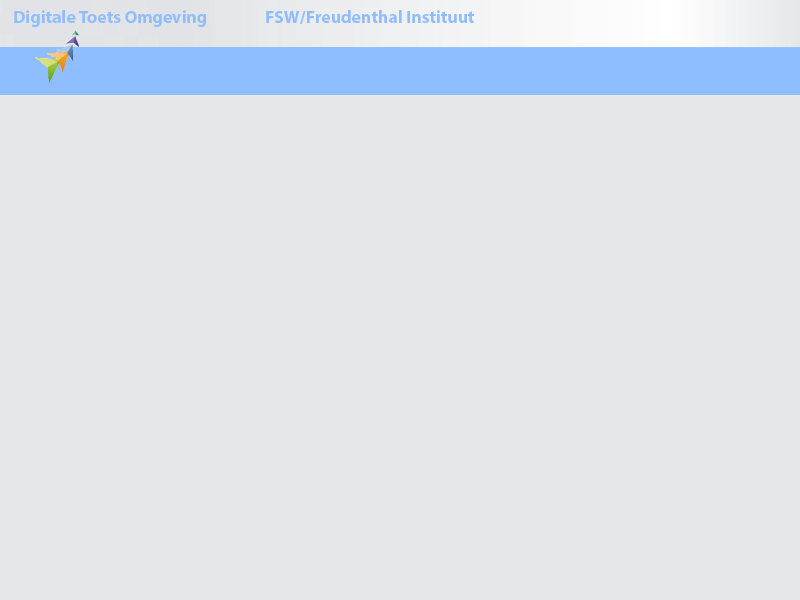
<style>
.page{position:relative;width:800px;height:600px;background:#e6e7e9}
.page>*{position:absolute;margin:0}
.t1{font:17.8px "MyriadPro-Bold";color:#8ebeff}
</style>
<div class="page">
<p class="t1" style="left:14px;top:10px;width:460px;height:17px">Digitale Toets Omgeving   FSW/Freudenthal Instituut</p>
</div>
